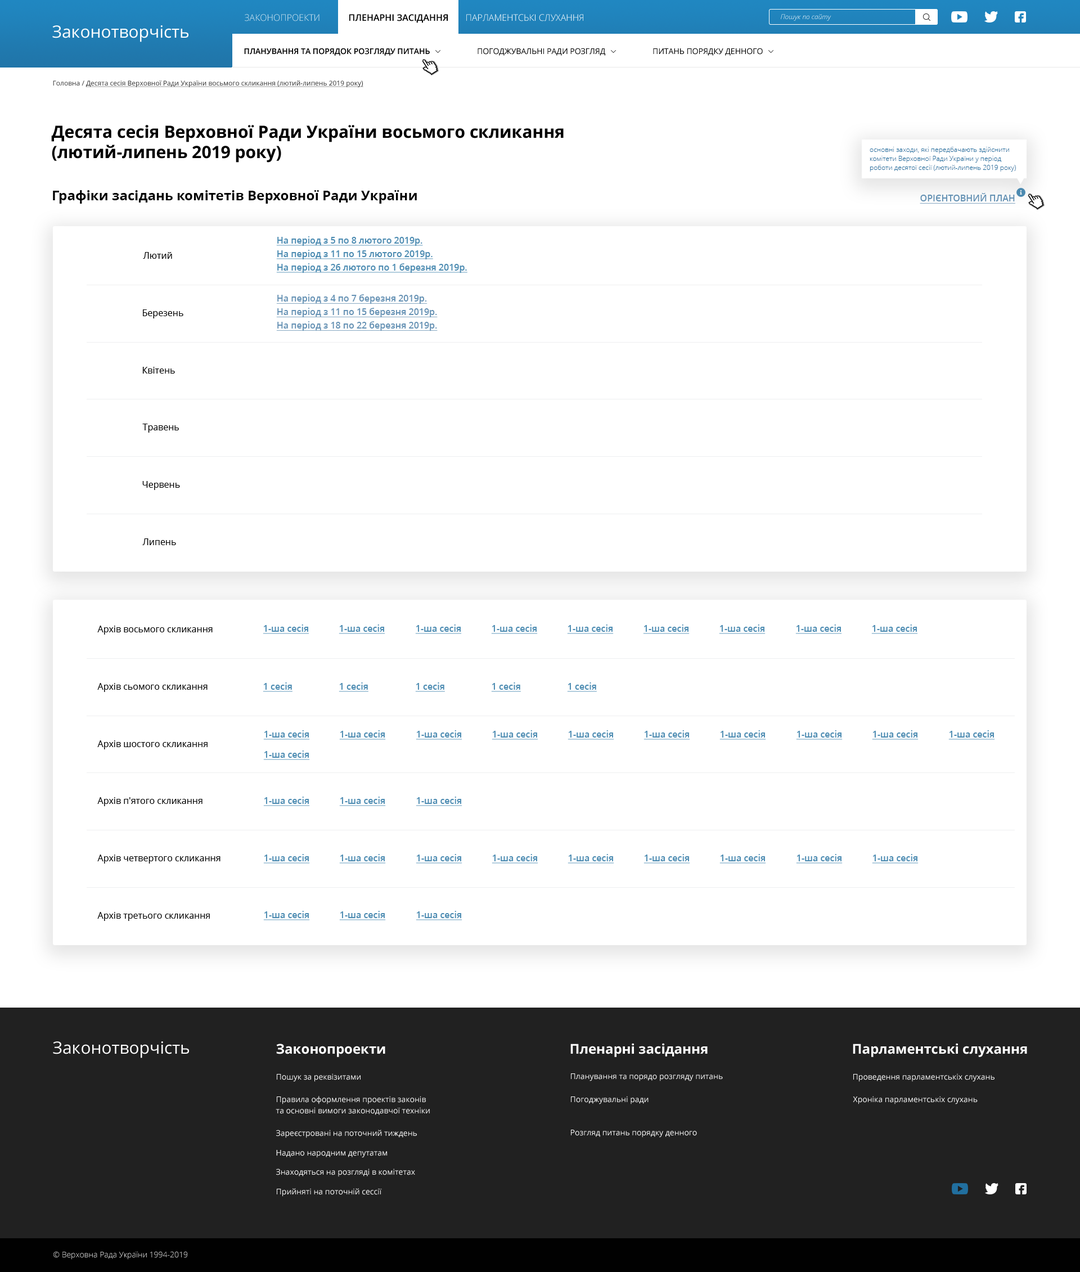
<style>
.page{position:relative;width:1080px;height:1272px;background:#ffffff}
.page>*{position:absolute;margin:0}
.t1{font:9px "OpenSans-Light";color:#d2e6f2;text-transform:uppercase}
.t2{font:9px "OpenSans-SemiBold";color:#000000;text-transform:uppercase}
.t3{font:9px "OpenSans-Light";color:#ffffff;text-transform:uppercase}
.t4{font:6.8px "OpenSans-LightItalic"}
.t5{font:16.9px "OpenSans-Regular";color:#ffffff}
.t6{font:7.9px "OpenSans-Regular";color:#000000}
.t7{font:7.9px "OpenSans-SemiBold";color:#000000}
.t8{font:6.8px "OpenSans-Regular";color:#333333;text-decoration:underline}
.t9{font:6.8px "OpenSans-Regular";color:#333333}
.t10{font:16.9px "OpenSans-Bold";color:#000000}
.t11{font:6.8px/9px "OpenSans-Light";color:#216f9f}
.t12{font:13.5px "OpenSans-Bold";color:#000000}
.t13{font:9px "OpenSans-SemiBold";color:#6391b4;text-decoration:underline}
.t14{font:9px/13.5px "OpenSans-SemiBold";color:#4d8cb2;text-decoration:underline}
.t15{font:9px "OpenSans-Regular";color:#000000}
.t16{font:9px/13.5px "OpenSans-SemiBold";color:#6592b5;text-decoration:underline}
.t17{font:9px "OpenSans-SemiBold";color:#4d8cb2;text-decoration:underline}
.t18{font:13.5px "OpenSans-Bold";color:#ffffff}
.t19{font:7.9px "OpenSans-Regular";color:#ffffff}
.t20{font:7.9px/11.3px "OpenSans-Regular";color:#ffffff}
.t21{font:7.9px/14.6px "OpenSans-Regular";color:#ffffff}
.t22{font:7.9px "OpenSans-Light"}
</style>
<div class="page">
<p class="t1" style="left:245px;top:14px;width:75px;height:7px">Законопроекти</p>
<p class="t2" style="left:349px;top:14px;width:99px;height:9px">пленарні засідання</p>
<p class="t3" style="left:466px;top:14px;width:117px;height:7px">парламентські слухання</p>
<p class="t4" style="left:781px;top:14px;width:50px;height:7px">Пошук по сайту</p>
<p class="t5" style="left:52px;top:25px;width:136px;height:17px">Законотворчість</p>
<p class="t6" style="left:244px;top:48px;width:519px;height:8px"><span class="t7">ПЛАНУВАННЯ ТА ПОРЯДОК РОЗГЛЯДУ ПИТАНЬ   </span>                    ПОГОДЖУВАЛЬНІ РАДИ РОЗГЛЯД                       ПИТАНЬ ПОРЯДКУ ДЕННОГО</p>
<p class="t8" style="left:53px;top:80px;width:310px;height:7px"><span class="t9">Головна / </span>Десята сесія Верховної Ради України восьмого скликання (лютий-липень 2019 року)</p>
<p class="t10" style="left:51px;top:125px;width:513px;height:38px">Десята сесія Верховної Ради України восьмого скликання <br>(лютий-липень 2019 року)</p>
<p class="t11" style="left:870px;top:147px;width:146px;height:25px">основні заходи, які передбачають здійснити комітети Верховної Ради України у період роботи десятої сесії (лютий-липень 2019 року)</p>
<p class="t12" style="left:53px;top:190px;width:364px;height:14px">Графіки засідань комітетів Верховної Ради України</p>
<p class="t13" style="left:920px;top:193px;width:95px;height:11px">ОРІЄНТОВНИЙ ПЛАН</p>
<p class="t14" style="left:276px;top:236px;width:191px;height:37px">На період з 5 по 8 лютого 2019р.<br>На період з 11 по 15 лютого 2019р.<br>На період з 26 лютого по 1 березня 2019р.</p>
<p class="t15" style="left:143px;top:252px;width:29px;height:7px">Лютий</p>
<p class="t16" style="left:276px;top:294px;width:162px;height:37px">На період з 4 по 7 березня 2019р.<br>На період з 11 по 15 березня 2019р.<br>На період з 18 по 22 березня 2019р.</p>
<p class="t15" style="left:143px;top:309px;width:40px;height:9px">Березень</p>
<p class="t15" style="left:142px;top:367px;width:33px;height:7px">Квітень</p>
<p class="t15" style="left:142px;top:424px;width:37px;height:9px">Травень</p>
<p class="t15" style="left:142px;top:481px;width:38px;height:9px">Червень</p>
<p class="t15" style="left:142px;top:538px;width:34px;height:7px">Липень</p>
<p class="t15" style="left:97px;top:626px;width:116px;height:9px">Архів восьмого скликання</p>
<p class="t17" style="left:263px;top:624px;width:46px;height:10px">1-ша сесія</p>
<p class="t17" style="left:339px;top:624px;width:46px;height:10px">1-ша сесія</p>
<p class="t17" style="left:415px;top:624px;width:47px;height:10px">1-ша сесія</p>
<p class="t17" style="left:491px;top:624px;width:47px;height:10px">1-ша сесія</p>
<p class="t17" style="left:567px;top:624px;width:47px;height:10px">1-ша сесія</p>
<p class="t17" style="left:643px;top:624px;width:47px;height:10px">1-ша сесія</p>
<p class="t17" style="left:719px;top:624px;width:47px;height:10px">1-ша сесія</p>
<p class="t17" style="left:795px;top:624px;width:47px;height:10px">1-ша сесія</p>
<p class="t17" style="left:871px;top:624px;width:47px;height:10px">1-ша сесія</p>
<p class="t15" style="left:97px;top:683px;width:111px;height:9px">Архів сьомого скликання</p>
<p class="t17" style="left:263px;top:682px;width:30px;height:10px">1 сесія</p>
<p class="t17" style="left:339px;top:682px;width:29px;height:10px">1 сесія</p>
<p class="t17" style="left:415px;top:682px;width:30px;height:10px">1 сесія</p>
<p class="t17" style="left:491px;top:682px;width:30px;height:10px">1 сесія</p>
<p class="t17" style="left:567px;top:682px;width:30px;height:10px">1 сесія</p>
<p class="t17" style="left:263px;top:730px;width:47px;height:10px">1-ша сесія</p>
<p class="t17" style="left:339px;top:730px;width:47px;height:10px">1-ша сесія</p>
<p class="t17" style="left:416px;top:730px;width:46px;height:10px">1-ша сесія</p>
<p class="t17" style="left:492px;top:730px;width:46px;height:10px">1-ша сесія</p>
<p class="t17" style="left:568px;top:730px;width:46px;height:10px">1-ша сесія</p>
<p class="t17" style="left:644px;top:730px;width:46px;height:10px">1-ша сесія</p>
<p class="t17" style="left:719px;top:730px;width:47px;height:10px">1-ша сесія</p>
<p class="t17" style="left:796px;top:730px;width:47px;height:10px">1-ша сесія</p>
<p class="t17" style="left:872px;top:730px;width:47px;height:10px">1-ша сесія</p>
<p class="t17" style="left:948px;top:730px;width:47px;height:10px">1-ша сесія</p>
<p class="t15" style="left:97px;top:740px;width:111px;height:9px">Архів шостого скликання</p>
<p class="t17" style="left:263px;top:750px;width:47px;height:10px">1-ша сесія</p>
<p class="t15" style="left:97px;top:797px;width:106px;height:9px">Архів п'ятого скликання</p>
<p class="t17" style="left:263px;top:797px;width:47px;height:9px">1-ша сесія</p>
<p class="t17" style="left:339px;top:797px;width:47px;height:9px">1-ша сесія</p>
<p class="t17" style="left:416px;top:797px;width:46px;height:9px">1-ша сесія</p>
<p class="t15" style="left:97px;top:854px;width:124px;height:9px">Архів четвертого скликання</p>
<p class="t17" style="left:263px;top:854px;width:47px;height:9px">1-ша сесія</p>
<p class="t17" style="left:339px;top:854px;width:47px;height:9px">1-ша сесія</p>
<p class="t17" style="left:416px;top:854px;width:46px;height:9px">1-ша сесія</p>
<p class="t17" style="left:492px;top:854px;width:46px;height:9px">1-ша сесія</p>
<p class="t17" style="left:568px;top:854px;width:46px;height:9px">1-ша сесія</p>
<p class="t17" style="left:644px;top:854px;width:46px;height:9px">1-ша сесія</p>
<p class="t17" style="left:719px;top:854px;width:47px;height:9px">1-ша сесія</p>
<p class="t17" style="left:796px;top:854px;width:47px;height:9px">1-ша сесія</p>
<p class="t17" style="left:872px;top:854px;width:47px;height:9px">1-ша сесія</p>
<p class="t15" style="left:97px;top:912px;width:113px;height:9px">Архів третього скликання</p>
<p class="t17" style="left:263px;top:911px;width:47px;height:9px">1-ша сесія</p>
<p class="t17" style="left:339px;top:911px;width:47px;height:9px">1-ша сесія</p>
<p class="t17" style="left:416px;top:911px;width:46px;height:9px">1-ша сесія</p>
<p class="t5" style="left:53px;top:1041px;width:136px;height:17px">Законотворчість</p>
<p class="t18" style="left:276px;top:1043px;width:109px;height:14px">Законопроекти</p>
<p class="t18" style="left:570px;top:1043px;width:138px;height:14px">Пленарні засідання</p>
<p class="t18" style="left:853px;top:1043px;width:174px;height:14px">Парламентські слухання</p>
<p class="t19" style="left:277px;top:1073px;width:84px;height:9px">Пошук за реквізитами</p>
<p class="t19" style="left:571px;top:1073px;width:152px;height:8px">Планування та порядо розгляду питань</p>
<p class="t19" style="left:853px;top:1073px;width:142px;height:9px">Проведення парламентськіх слухань</p>
<p class="t20" style="left:276px;top:1096px;width:154px;height:19px"><span class="t21">Правила оформлення проектів законів<br></span>та основні вимоги законодавчої техніки</p>
<p class="t19" style="left:571px;top:1096px;width:78px;height:8px">Погоджувальні ради</p>
<p class="t19" style="left:853px;top:1096px;width:125px;height:8px">Хроніка парламентськіх слухань</p>
<p class="t19" style="left:276px;top:1130px;width:141px;height:8px">Зареєстровані на поточний тиждень</p>
<p class="t19" style="left:571px;top:1130px;width:126px;height:7px">Розгляд питань порядку денного</p>
<p class="t19" style="left:276px;top:1150px;width:111px;height:8px">Надано народним депутатам</p>
<p class="t19" style="left:276px;top:1168px;width:139px;height:9px">Знаходяться на розгляді в комітетах</p>
<p class="t19" style="left:277px;top:1188px;width:105px;height:8px">Прийняті на поточній сессії</p>
<p class="t22" style="left:53px;top:1251px;width:134px;height:8px">© Верховна Рада України 1994-2019</p>
</div>
